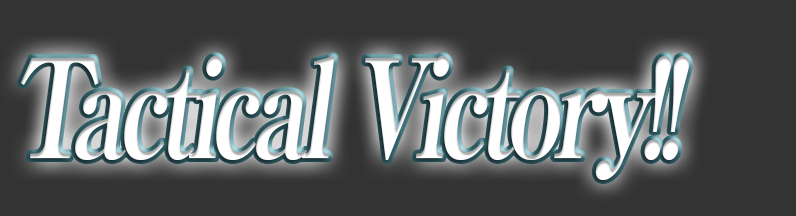
<style>
.page{position:relative;width:796px;height:216px;background:#333333}
.page>*{position:absolute;margin:0}
.t1{font:136.8px "RyuminPro-ExBold";letter-spacing:-0.08em;color:#ffffff;font-style:italic;scale:0.75 1}
</style>
<div class="page">
<p class="t1" style="left:20px;top:55px;width:670px;height:125px">Tactical Victory!!</p>
</div>
